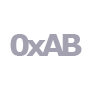
<style>
.page{position:relative;width:90px;height:90px;background:#ffffff}
.page>*{position:absolute;margin:0}
.t1{font:30px "Verdana-Bold";letter-spacing:-0.15em;color:#a3a0b0}
</style>
<div class="page">
<p class="t1" style="left:10px;top:34px;width:72px;height:22px">0xAB</p>
</div>
